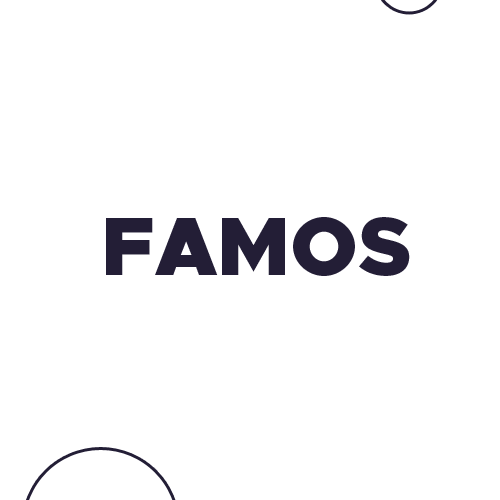
<style>
.page{position:relative;width:500px;height:500px;background:#ffffff}
.page>*{position:absolute;margin:0}
.t1{font:83.3px "Metropolis-Black";color:#231e36}
</style>
<div class="page">
<p class="t1" style="left:106px;top:217px;width:304px;height:59px">FAMOS</p>
</div>
